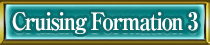
<style>
.page{position:relative;width:210px;height:45px}
.page>*{position:absolute;margin:0}
.t1{font:24px "RyuminPro-ExBold";letter-spacing:-0.08em;color:#ffffff;scale:0.9 1}
</style>
<div class="page">
<p class="t1" style="left:12px;top:12px;width:186px;height:22px">Cruising Formation 3</p>
</div>
